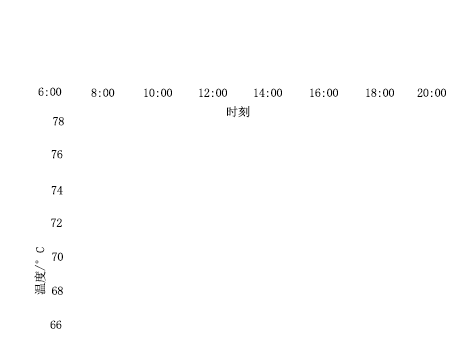
<style>
.page{position:relative;width:454px;height:340px;background:#ffffff}
.page>*{position:absolute;margin:0}
.t1{font:12.2px "SimSun";letter-spacing:-0.02em;color:#000000}
.t2{font:12px "SimSun";letter-spacing:-0.02em;color:#000000}
</style>
<div class="page">
<p class="t1" style="left:38px;top:87px;width:24px;height:9px">6:00</p>
<p class="t1" style="left:91px;top:88px;width:24px;height:9px">8:00</p>
<p class="t1" style="left:144px;top:88px;width:28px;height:9px">10:00</p>
<p class="t1" style="left:199px;top:88px;width:28px;height:9px">12:00</p>
<p class="t1" style="left:254px;top:88px;width:28px;height:9px">14:00</p>
<p class="t1" style="left:310px;top:88px;width:28px;height:9px">16:00</p>
<p class="t1" style="left:366px;top:88px;width:28px;height:9px">18:00</p>
<p class="t1" style="left:417px;top:88px;width:29px;height:9px">20:00</p>
<p class="t1" style="left:227px;top:106px;width:23px;height:12px">时刻</p>
<p class="t1" style="left:53px;top:117px;width:11px;height:9px">78</p>
<p class="t1" style="left:51px;top:150px;width:12px;height:9px">76</p>
<p class="t1" style="left:51px;top:186px;width:12px;height:9px">74</p>
<p class="t1" style="left:51px;top:218px;width:11px;height:9px">72</p>
<p class="t2" style="left:34px;top:247px;width:12px;height:48px;rotate:-90deg">温度/°C</p>
<p class="t1" style="left:52px;top:252px;width:11px;height:9px">70</p>
<p class="t1" style="left:52px;top:286px;width:11px;height:9px">68</p>
<p class="t1" style="left:50px;top:320px;width:12px;height:9px">66</p>
</div>
